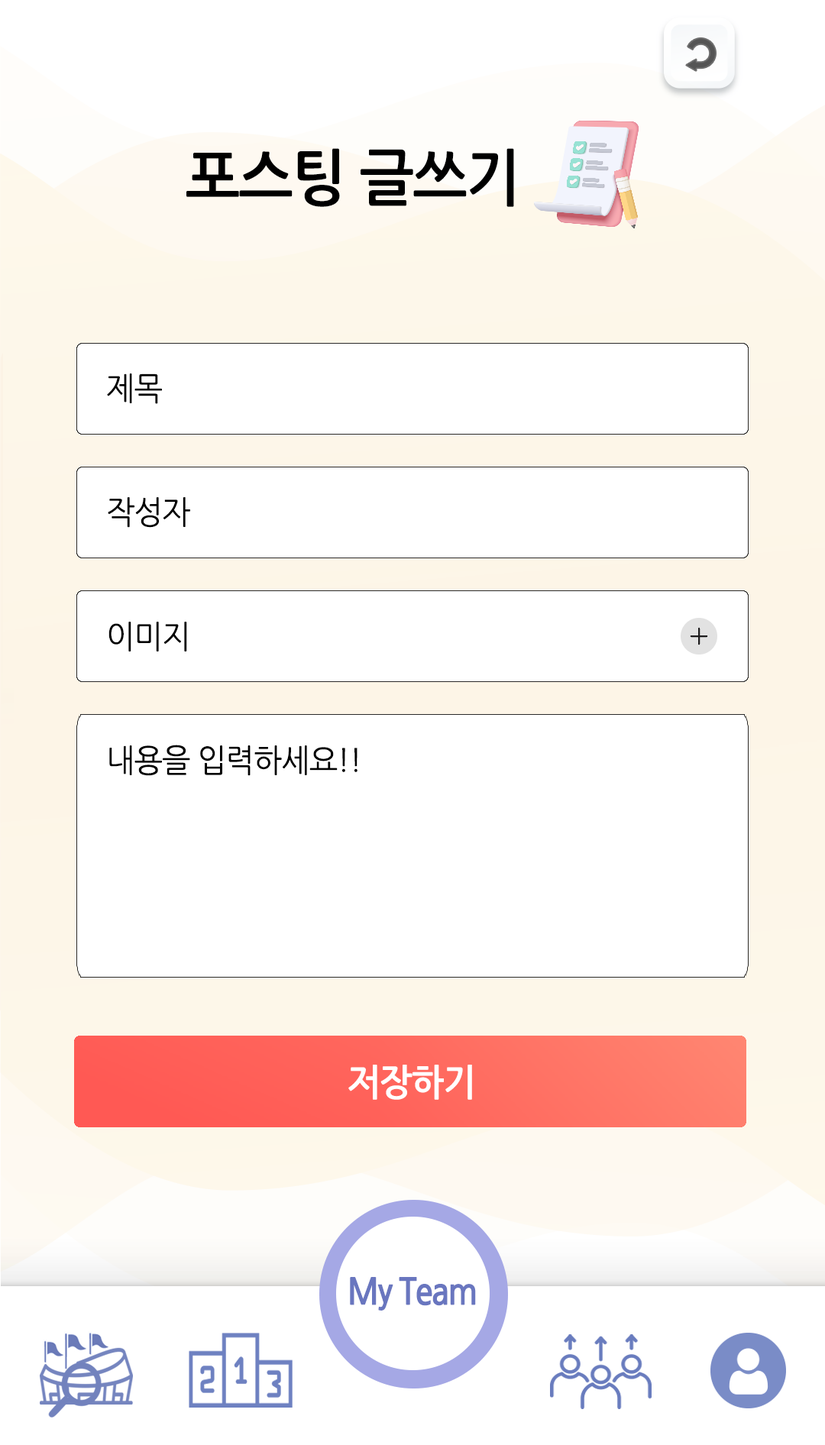
<style>
.page{position:relative;width:825px;height:1445px;background:#ffffff}
.page>*{position:absolute;margin:0}
.t1{font:61.1px "NanumGothicBold";letter-spacing:-0.025em;color:#000000;scale:0.95 1}
.t2{font:32.1px "NanumGothic";letter-spacing:-0.025em;color:#000000;scale:0.95 1}
.t3{font:36.7px "NanumGothicBold";letter-spacing:-0.025em;color:#ffffff;scale:0.95 1}
</style>
<div class="page">
<p class="t1" style="left:186px;top:148px;width:328px;height:59px">포스팅 글쓰기</p>
<p class="t2" style="left:107px;top:374px;width:55px;height:30px">제목</p>
<p class="t2" style="left:108px;top:497px;width:82px;height:31px">작성자</p>
<p class="t2" style="left:108px;top:622px;width:79px;height:30px">이미지</p>
<p class="t2" style="left:109px;top:745px;width:249px;height:31px">내용을 입력하세요!!</p>
<p class="t3" style="left:348px;top:1065px;width:124px;height:35px">저장하기</p>
</div>
